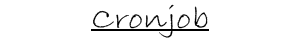
<style>
.page{position:relative;width:300px;height:40px;background:#ffffff}
.page>*{position:absolute;margin:0}
.t1{font:30px "BradleyHandITC";color:#000000;scale:1.26 1}
</style>
<div class="page">
<p class="t1" style="left:93px;top:4px;width:115px;height:34px">Cronjob</p>
</div>
